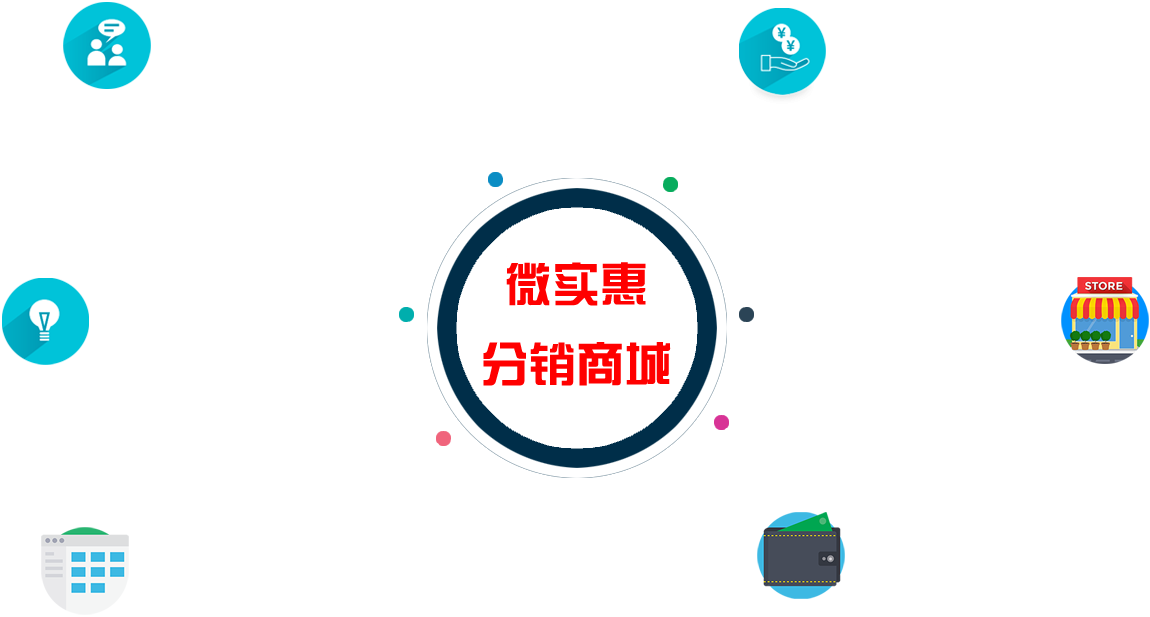
<style>
.page{position:relative;width:1150px;height:617px;background:#ffffff}
.page>*{position:absolute;margin:0}
.t1{font:48px/80px "FZXZYJW--GB1-0";color:#ff0000}
</style>
<div class="page">
<p class="t1" style="left:483px;top:262px;width:188px;height:124px;text-align:center">微实惠<br>分销商城</p>
</div>
